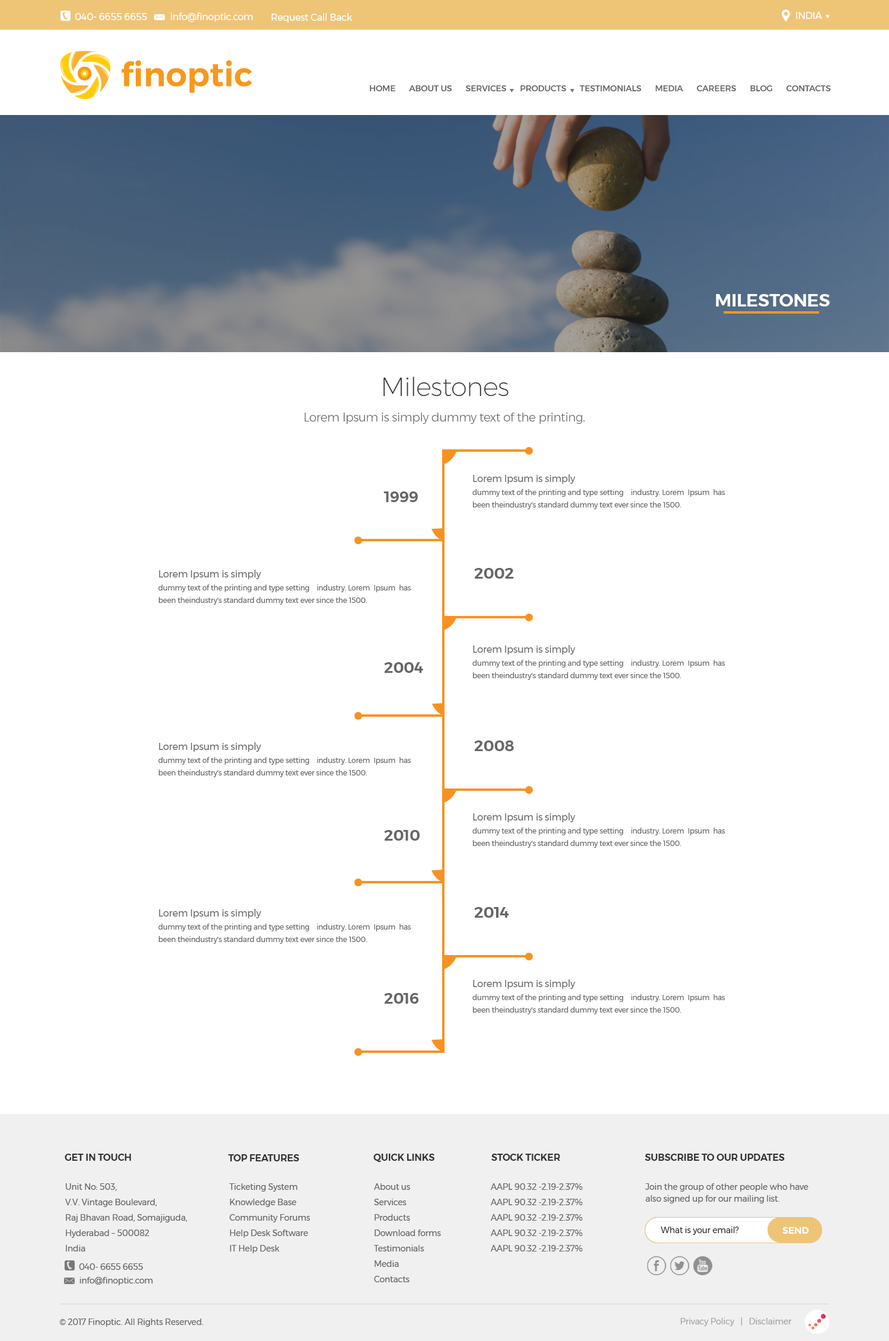
<style>
.page{position:relative;width:889px;height:1341px;background:#ffffff}
.page>*{position:absolute;margin:0}
.t1{font:9.5px "Montserrat-Regular";letter-spacing:-0.02em;color:#ffffff}
.t2{font:8.3px "Montserrat-Medium";letter-spacing:-0.01em;color:#666666}
.t3{font:17.8px "Montserrat-SemiBold";letter-spacing:-0.01em;color:#ffffff;text-transform:uppercase}
.t4{font:26.1px "Montserrat-ExtraLight";letter-spacing:-0.02em;color:#333333}
.t5{font:11.9px "Montserrat-Light";letter-spacing:-0.02em;color:#666666}
.t6{font:7.1px/13px "Montserrat-Regular";letter-spacing:-0.01em;color:#666666}
.t7{font:9.5px/14.2px "Montserrat-Regular";letter-spacing:-0.01em;color:#666666}
.t8{font:15.2px "Montserrat-SemiBold";letter-spacing:-0.01em;color:#666666}
.t9{font:9.5px "Montserrat-SemiBold";letter-spacing:-0.01em;color:#333333}
.t10{font:8.3px/15.4px "Montserrat-Regular";letter-spacing:-0.01em;color:#666666}
.t11{font:8.3px/11.9px "Montserrat-Regular";letter-spacing:-0.01em;color:#666666}
.t12{font:8.3px "Montserrat-Regular";letter-spacing:-0.01em;color:#333333}
.t13{font:9.5px "Montserrat-Bold";letter-spacing:-0.02em;color:#ffffff}
.t14{font:8.3px "Montserrat-Regular";letter-spacing:-0.02em;color:#666666}
.t15{font:8.4px "Montserrat-Regular";letter-spacing:-0.01em;color:#696969}
.t16{font:8.3px "Montserrat-Regular";letter-spacing:-0.01em;color:#a6a6a6}
</style>
<div class="page">
<p class="t1" style="left:75px;top:13px;width:72px;height:7px">040- 6655 6655</p>
<p class="t1" style="left:171px;top:12px;width:82px;height:11px">info@finoptic.com</p>
<p class="t1" style="left:272px;top:13px;width:81px;height:10px">Request Call Back</p>
<p class="t1" style="left:796px;top:12px;width:27px;height:7px">INDIA</p>
<p class="t2" style="left:370px;top:85px;width:461px;height:6px">HOME       ABOUT US       SERVICES       PRODUCTS       TESTIMONIALS       MEDIA       CAREERS       BLOG       CONTACTS</p>
<p class="t3" style="left:716px;top:294px;width:114px;height:12px">MILESTONES</p>
<p class="t4" style="left:384px;top:376px;width:125px;height:20px">Milestones</p>
<p class="t5" style="left:305px;top:413px;width:280px;height:11px">Lorem Ipsum is simply dummy text of the printing.</p>
<p class="t6" style="left:472px;top:474px;width:253px;height:35px"><span class="t7">Lorem Ipsum is simply <br></span>dummy text of the printing and type setting    industry. Lorem  Ipsum  has<br>been theindustry's standard dummy text ever since the 1500.</p>
<p class="t8" style="left:384px;top:491px;width:34px;height:11px">1999</p>
<p class="t6" style="left:158px;top:570px;width:253px;height:35px"><span class="t7">Lorem Ipsum is simply <br></span>dummy text of the printing and type setting    industry. Lorem  Ipsum  has<br>been theindustry's standard dummy text ever since the 1500.</p>
<p class="t8" style="left:474px;top:568px;width:40px;height:11px">2002</p>
<p class="t6" style="left:472px;top:645px;width:253px;height:35px"><span class="t7">Lorem Ipsum is simply <br></span>dummy text of the printing and type setting    industry. Lorem  Ipsum  has<br>been theindustry's standard dummy text ever since the 1500.</p>
<p class="t8" style="left:384px;top:662px;width:39px;height:11px">2004</p>
<p class="t6" style="left:158px;top:742px;width:253px;height:35px"><span class="t7">Lorem Ipsum is simply <br></span>dummy text of the printing and type setting    industry. Lorem  Ipsum  has<br>been theindustry's standard dummy text ever since the 1500.</p>
<p class="t8" style="left:474px;top:740px;width:40px;height:11px">2008</p>
<p class="t6" style="left:472px;top:813px;width:253px;height:35px"><span class="t7">Lorem Ipsum is simply <br></span>dummy text of the printing and type setting    industry. Lorem  Ipsum  has<br>been theindustry's standard dummy text ever since the 1500.</p>
<p class="t8" style="left:384px;top:830px;width:36px;height:11px">2010</p>
<p class="t6" style="left:158px;top:909px;width:253px;height:35px"><span class="t7">Lorem Ipsum is simply <br></span>dummy text of the printing and type setting    industry. Lorem  Ipsum  has<br>been theindustry's standard dummy text ever since the 1500.</p>
<p class="t8" style="left:474px;top:907px;width:35px;height:11px">2014</p>
<p class="t6" style="left:472px;top:979px;width:253px;height:35px"><span class="t7">Lorem Ipsum is simply <br></span>dummy text of the printing and type setting    industry. Lorem  Ipsum  has<br>been theindustry's standard dummy text ever since the 1500.</p>
<p class="t8" style="left:384px;top:993px;width:35px;height:11px">2016</p>
<p class="t9" style="left:65px;top:1154px;width:66px;height:7px">GET IN TOUCH</p>
<p class="t9" style="left:228px;top:1154px;width:71px;height:7px">TOP FEATURES</p>
<p class="t9" style="left:373px;top:1154px;width:62px;height:8px">QUICK LINKS</p>
<p class="t9" style="left:491px;top:1154px;width:69px;height:7px">STOCK TICKER</p>
<p class="t9" style="left:645px;top:1154px;width:140px;height:7px">SUBSCRIBE TO OUR UPDATES</p>
<p class="t10" style="left:65px;top:1183px;width:122px;height:68px">Unit No: 503,<br>V.V. Vintage Boulevard,<br>Raj Bhavan Road, Somajiguda, <br>Hyderabad – 500082 <br>India</p>
<p class="t10" style="left:229px;top:1183px;width:81px;height:70px">Ticketing System<br>Knowledge Base<br>Community Forums<br>Help Desk Software<br>IT Help Desk</p>
<p class="t10" style="left:373px;top:1183px;width:68px;height:99px">About us<br>Services<br>Products<br>Download forms<br>Testimonials<br>Media<br>Contacts</p>
<p class="t10" style="left:490px;top:1183px;width:93px;height:68px">AAPL 90.32 -2.19-2.37%<br>AAPL 90.32 -2.19-2.37%<br>AAPL 90.32 -2.19-2.37%<br>AAPL 90.32 -2.19-2.37%<br>AAPL 90.32 -2.19-2.37%</p>
<p class="t11" style="left:645px;top:1183px;width:164px;height:20px">Join the group of other people who have<br>also signed up for our mailing list.</p>
<p class="t12" style="left:660px;top:1227px;width:79px;height:8px">What is your email?</p>
<p class="t13" style="left:783px;top:1227px;width:26px;height:7px">SEND</p>
<p class="t14" style="left:79px;top:1263px;width:64px;height:7px">040- 6655 6655</p>
<p class="t14" style="left:79px;top:1277px;width:74px;height:8px">info@finoptic.com</p>
<p class="t15" style="left:59px;top:1318px;width:144px;height:9px">© 2017 Finoptic. All Rights Reserved.</p>
<p class="t16" style="left:681px;top:1317px;width:111px;height:9px">Privacy Policy   |   Disclaimer</p>
</div>
